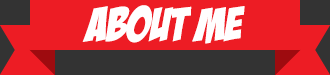
<style>
.page{position:relative;width:330px;height:75px;background:#ed1c24}
.page>*{position:absolute;margin:0}
.t1{font:47px "BadaBoomBB";color:#fffefe}
</style>
<div class="page">
<p class="t1" style="left:82px;top:5px;width:163px;height:39px">about me</p>
</div>
